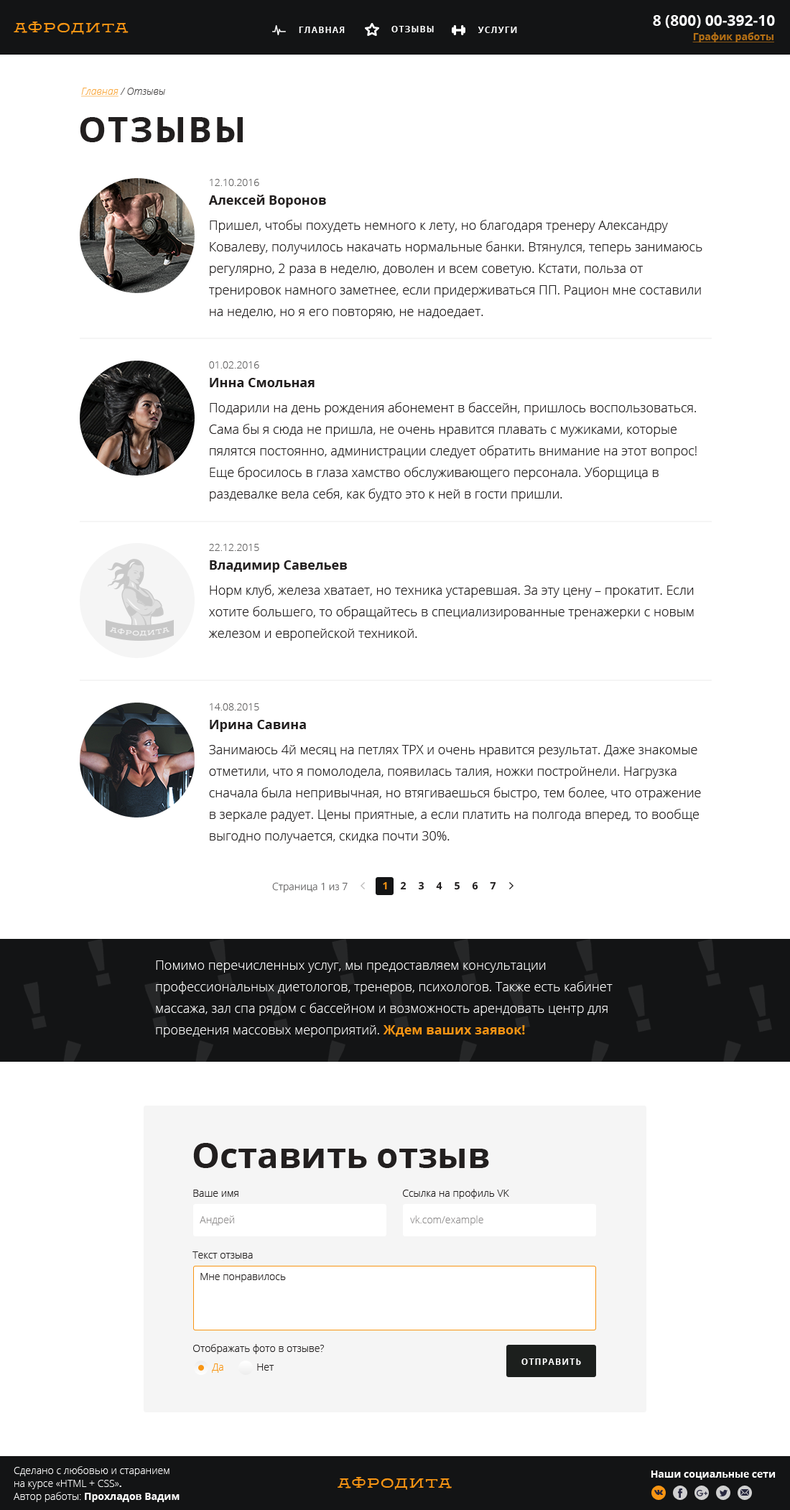
<style>
.page{position:relative;width:790px;height:1510px;background:#ffffff}
.page>*{position:absolute;margin:0}
.t1{font:15.1px "OpenSans-Bold";color:#ffffff;text-transform:uppercase}
.t2{font:12.9px "GoraFree-Regular";letter-spacing:0.1em;color:#f89513;text-transform:uppercase}
.t3{font:8.6px "OpenSans-Bold";letter-spacing:0.1em;color:#ffffff;text-transform:uppercase}
.t4{font:10.1px "OpenSans-Bold";color:#b46f14;text-decoration:underline}
.t5{font:10.1px "OpenSansLight-Italic"}
.t6{font:10.1px "OpenSansLight-Italic";text-decoration:underline}
.t7{font:35.2px "OpenSans-Bold";letter-spacing:0.05em;color:#221f1f;text-transform:uppercase}
.t8{font:12.9px/21.5px "OpenSans-Light";color:#221f1f}
.t9{font:10.1px/15.1px "OpenSans-Light";color:#656464}
.t10{font:12.9px/15.1px "OpenSans-Bold";color:#221f1f}
.t11{font:10.1px "OpenSans-Light";color:#656464}
.t12{font:10.1px "OpenSans-Bold";color:#f89513}
.t13{font:10.1px "OpenSans-Bold";color:#221f1f}
.t14{font:12.9px/21.5px "OpenSans-Light";color:#ffffff}
.t15{font:12.9px/21.5px "OpenSans-Bold";color:#f89513}
.t16{font:35.2px "OpenSans-Bold";color:#221f1f}
.t17{font:10.1px "OpenSans-Light";color:#221f1f}
.t18{font:10.1px "OpenSans-Light";color:#908f8f}
.t19{font:10.1px "OpenSans-Light";color:#f89513}
.t20{font:10.1px/12.9px "OpenSans-Light";color:#ffffff}
.t21{font:10.1px/12.9px "OpenSans-Bold";color:#ffffff}
.t22{font:13.1px "GoraFree-Regular";letter-spacing:0.1em;color:#f89513;text-transform:uppercase}
.t23{font:10.1px "OpenSans-Bold";color:#ffffff}
</style>
<div class="page">
<p class="t1" style="left:653px;top:15px;width:122px;height:13px">8 (800) 00-392-10</p>
<p class="t2" style="left:14px;top:22px;width:115px;height:12px">Афродита</p>
<p class="t3" style="left:299px;top:27px;width:46px;height:6px">Главная</p>
<p class="t3" style="left:391px;top:26px;width:43px;height:6px">Отзывы</p>
<p class="t3" style="left:478px;top:27px;width:39px;height:6px">Услуги</p>
<p class="t4" style="left:692px;top:32px;width:82px;height:10px">График работы</p>
<p class="t5" style="left:81px;top:88px;width:84px;height:9px"><span class="t6">Главная</span> / Отзывы</p>
<p class="t7" style="left:80px;top:117px;width:163px;height:25px">Отзывы</p>
<p class="t8" style="left:208px;top:179px;width:494px;height:140px"><span class="t9">12.10.2016<br></span><span class="t10">Алексей Воронов<br></span>Пришел, чтобы похудеть немного к лету, но благодаря тренеру Александру Ковалеву, получилось накачать нормальные банки. Втянулся, теперь занимаюсь регулярно, 2 раза в неделю, доволен и всем советую. Кстати, польза от тренировок намного заметнее, если придерживаться ПП. Рацион мне составили на неделю, но я его повторяю, не надоедает.</p>
<p class="t8" style="left:209px;top:361px;width:488px;height:140px"><span class="t9">01.02.2016<br></span><span class="t10">Инна Смольная<br></span>Подарили на день рождения абонемент в бассейн, пришлось воспользоваться. Сама бы я сюда не пришла, не очень нравится плавать с мужиками, которые пялятся постоянно, администрации следует обратить внимание на этот вопрос! Еще бросилось в глаза хамство обслуживающего персонала. Уборщица в раздевалке вела себя, как будто это к ней в гости пришли.</p>
<p class="t8" style="left:208px;top:544px;width:486px;height:97px"><span class="t9">22.12.2015<br></span><span class="t10">Владимир Савельев<br></span>Норм клуб, железа хватает, но техника устаревшая. За эту цену – прокатит. Если хотите большего, то обращайтесь в специализированные тренажерки с новым железом и европейской техникой.</p>
<p class="t8" style="left:209px;top:703px;width:492px;height:140px"><span class="t9">14.08.2015<br></span><span class="t10">Ирина Савина<br></span>Занимаюсь 4й месяц на петлях ТРХ и очень нравится результат. Даже знакомые отметили, что я помолодела, появилась талия, ножки постройнели. Нагрузка сначала была непривычная, но втягиваешься быстро, тем более, что отражение в зеркале радует. Цены приятные, а если платить на полгода вперед, то вообще выгодно получается, скидка почти 30%.</p>
<p class="t11" style="left:272px;top:882px;width:76px;height:11px">Страница 1 из 7</p>
<p class="t12" style="left:383px;top:881px;width:4px;height:9px">1</p>
<p class="t13" style="left:400px;top:881px;width:6px;height:9px">2</p>
<p class="t13" style="left:418px;top:881px;width:6px;height:9px">3</p>
<p class="t13" style="left:436px;top:881px;width:6px;height:9px">4</p>
<p class="t13" style="left:455px;top:881px;width:5px;height:9px">5</p>
<p class="t13" style="left:472px;top:881px;width:6px;height:9px">6</p>
<p class="t13" style="left:490px;top:881px;width:6px;height:9px">7</p>
<p class="t14" style="left:156px;top:960px;width:457px;height:77px">Помимо перечисленных услуг, мы предоставляем консультации профессиональных диетологов, тренеров, психологов. Также есть кабинет массажа, зал спа рядом с бассейном и возможность арендовать центр для проведения массовых мероприятий. <span class="t15">Ждем ваших заявок!</span></p>
<p class="t16" style="left:193px;top:1143px;width:296px;height:25px">Оставить отзыв</p>
<p class="t17" style="left:193px;top:1189px;width:45px;height:7px">Ваше имя</p>
<p class="t17" style="left:403px;top:1189px;width:106px;height:10px">Ссылка на профиль VK</p>
<p class="t18" style="left:200px;top:1215px;width:34px;height:10px">Андрей</p>
<p class="t18" style="left:410px;top:1215px;width:73px;height:10px">vk.com/example</p>
<p class="t17" style="left:192px;top:1251px;width:61px;height:7px">Текст отзыва</p>
<p class="t17" style="left:200px;top:1273px;width:86px;height:9px">Мне понравилось</p>
<p class="t17" style="left:193px;top:1344px;width:131px;height:10px">Отображать фото в отзыве?</p>
<p class="t3" style="left:521px;top:1358px;width:60px;height:6px">Отправить</p>
<p class="t19" style="left:212px;top:1363px;width:11px;height:9px">Да</p>
<p class="t17" style="left:257px;top:1363px;width:17px;height:7px">Нет</p>
<p class="t20" style="left:14px;top:1466px;width:166px;height:36px">Сделано с любовью и старанием<br>на курсе «HTML + CSS»<span class="t21">.<br></span>Автор работы:<span class="t21"> Прохладов Вадим</span></p>
<p class="t22" style="left:338px;top:1476px;width:114px;height:13px">Афродита</p>
<p class="t23" style="left:651px;top:1470px;width:125px;height:9px">Наши социальные сети</p>
</div>
